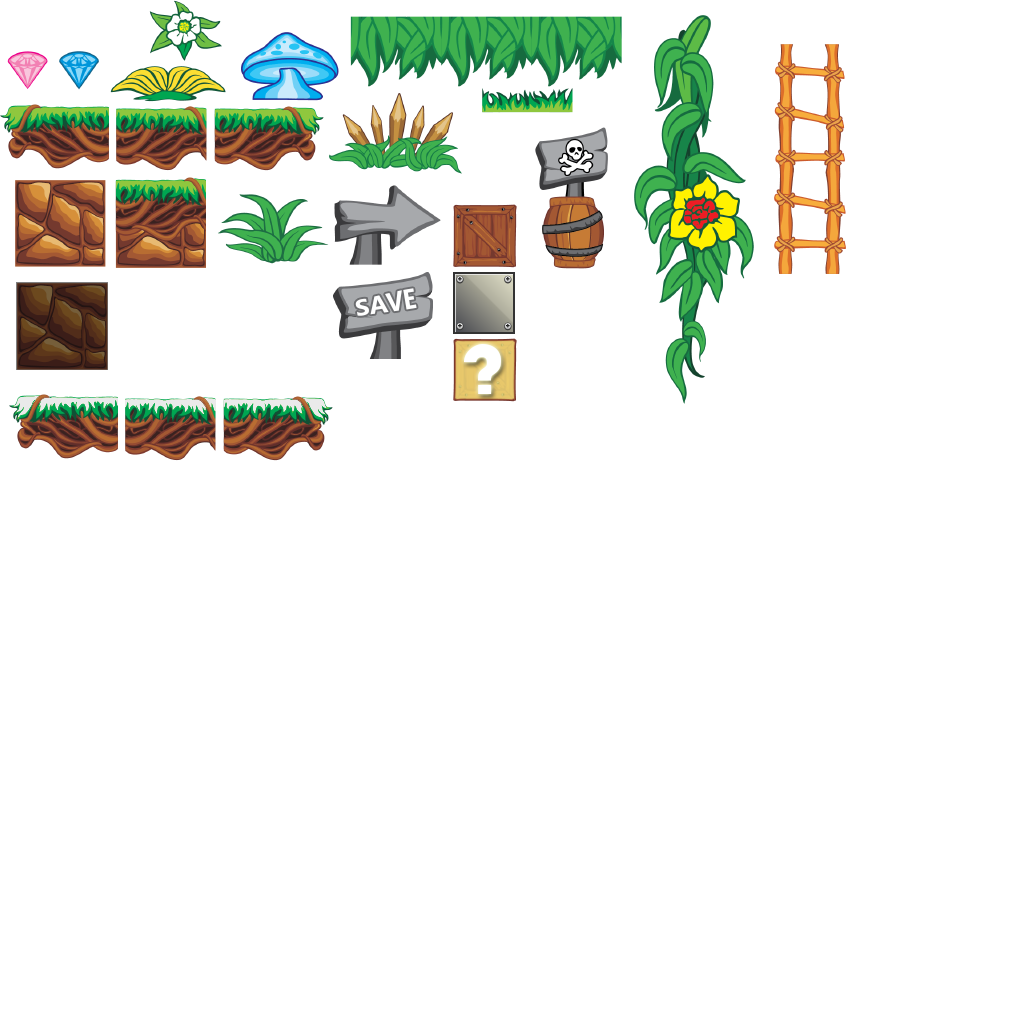
<style>
.page{position:relative;width:1024px;height:1024px;background:#ffffff}
.page>*{position:absolute;margin:0}
.t1{font:25px "MicrosoftTaiLe-Bold";color:#ffffff}
</style>
<div class="page">
<p class="t1" style="left:355px;top:288px;width:62px;height:28px;rotate:-9deg">SAVE</p>
</div>
